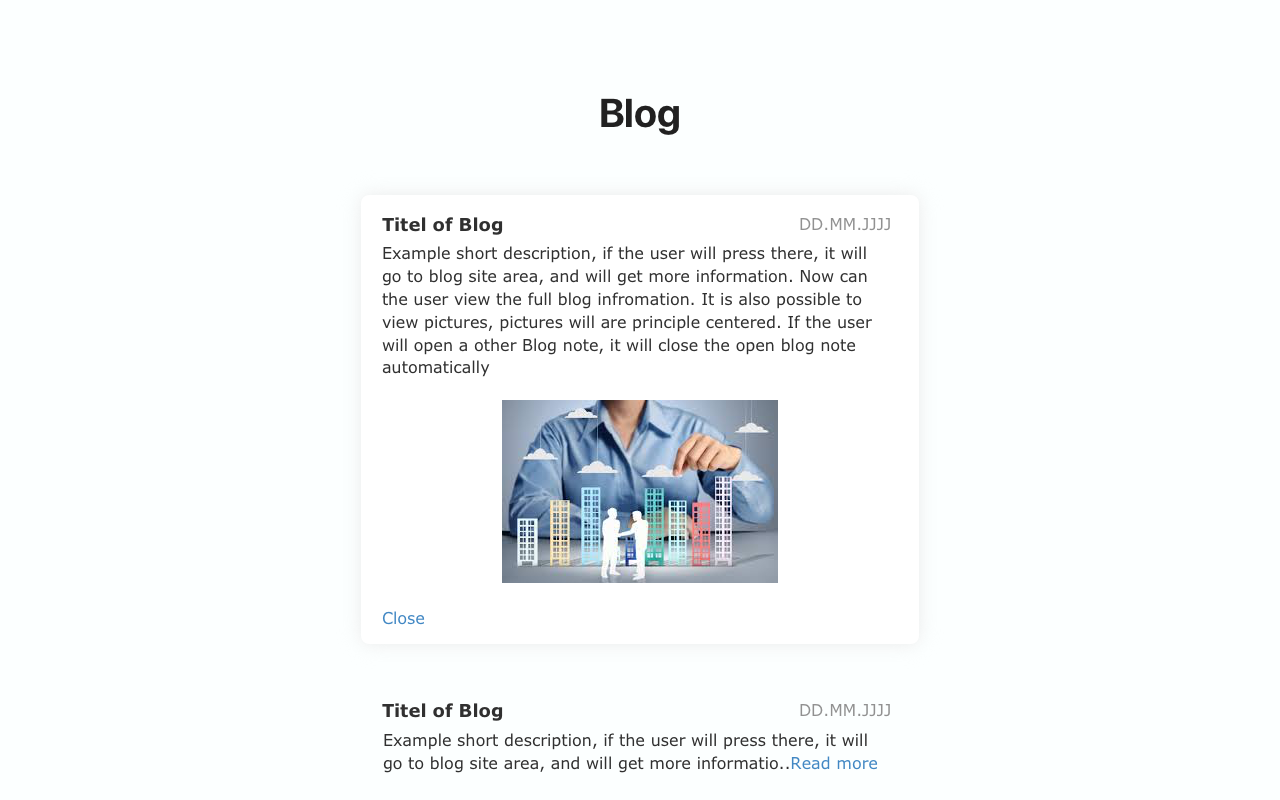
<style>
.page{position:relative;width:1280px;height:800px;background:#fcffff}
.page>*{position:absolute;margin:0}
.t1{font:40px "SFProDisplay-Bold";color:#212121}
.t2{font:18px "Verdana-Bold";color:#303030}
.t3{font:16px "Verdana";color:#919191}
.t4{font:16px/22.5px "Verdana";color:#303030}
.t5{font:16px/22.5px "Verdana";color:#4187c3}
</style>
<div class="page">
<p class="t1" style="left:601px;top:98px;width:78px;height:37px">Blog</p>
<p class="t2" style="left:382px;top:217px;width:121px;height:18px">Titel of Blog</p>
<p class="t3" style="left:800px;top:218px;width:90px;height:13px">DD.MM.JJJJ</p>
<p class="t4" style="left:382px;top:246px;width:490px;height:379px">Example short description, if the user will press there, it will<br>go to blog site area, and will get more information. Now can the user view the full blog infromation. It is also possible to view pictures, pictures will are principle centered. If the user will open a other Blog note, it will close the open blog note automatically<br><br><br><br><br><span class="t5"><br><br><br><br><br><br>Close</span></p>
<p class="t2" style="left:382px;top:703px;width:121px;height:18px">Titel of Blog</p>
<p class="t3" style="left:800px;top:704px;width:90px;height:13px">DD.MM.JJJJ</p>
<p class="t4" style="left:383px;top:733px;width:495px;height:40px">Example short description, if the user will press there, it will<br>go to blog site area, and will get more informatio..<span class="t5">Read more</span></p>
</div>
